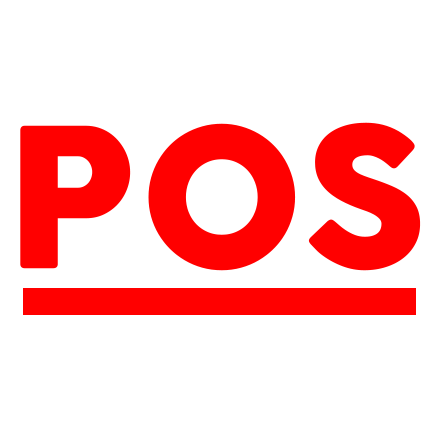
<style>
.page{position:relative;width:440px;height:440px;background:#ffffff}
.page>*{position:absolute;margin:0}
.t1{font:190.6px "Cocogoose";color:#ff0000;font-weight:bold}
</style>
<div class="page">
<p class="t1" style="left:20px;top:122px;width:401px;height:149px">POS</p>
</div>
